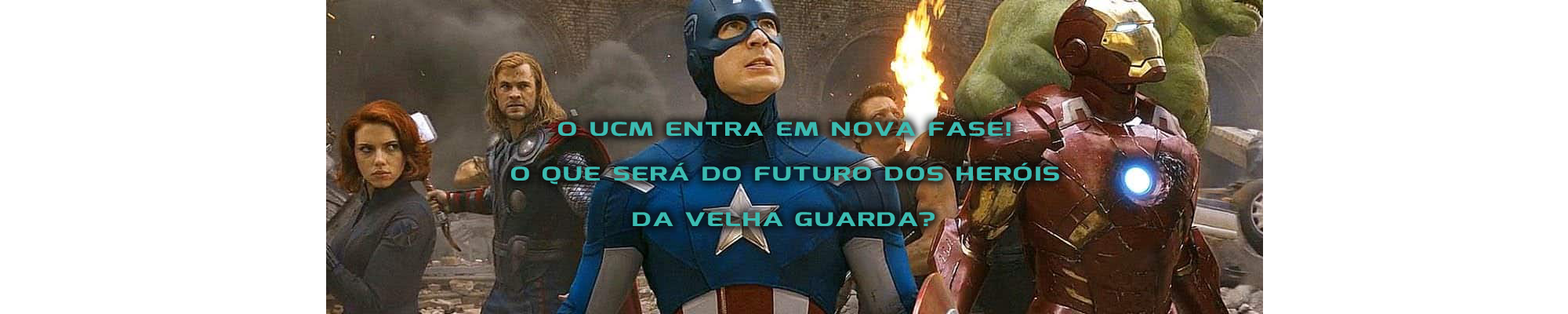
<style>
.page{position:relative;width:1568px;height:314px;background:#ffffff}
.page>*{position:absolute;margin:0}
.t1{font:18.8px "Mina-Bold";letter-spacing:0.025em;color:#3cbbb1;scale:1.62 1}
</style>
<div class="page">
<p class="t1" style="left:511px;top:122px;width:548px;height:104px;text-align:center">O UCM ENTRA EM NOVA FASE!<br>O QUE SERÁ DO FUTURO DOS HERÓIS<br>DA VELHA GUARDA?</p>
</div>
